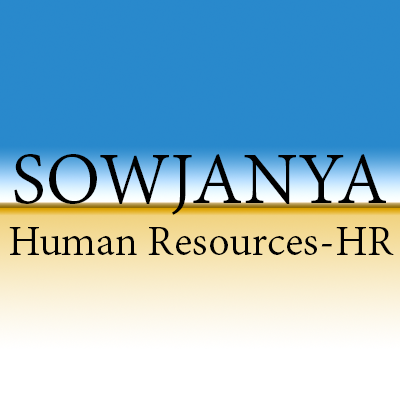
<style>
.page{position:relative;width:400px;height:400px;background:#2989cc}
.page>*{position:absolute;margin:0}
.t1{font:79.2px "AdobeDevanagari-Regular";color:#000000}
.t2{font:45.8px "AdobeDevanagari-Regular";color:#000000}
</style>
<div class="page">
<p class="t1" style="left:14px;top:154px;width:372px;height:61px">SOWJANYA</p>
<p class="t2" style="left:9px;top:227px;width:385px;height:28px">Human Resources-HR</p>
</div>
